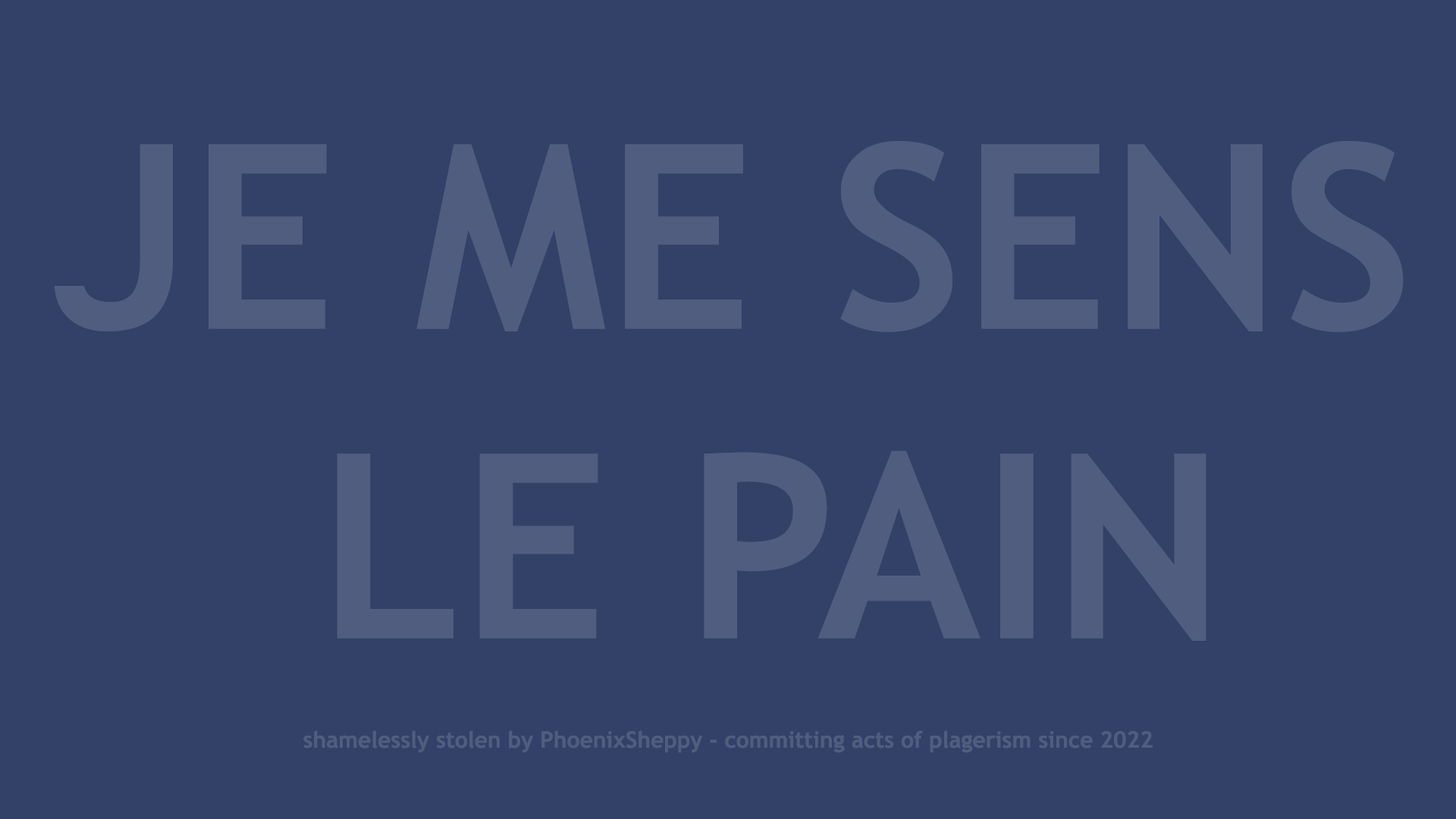
<style>
.page{position:relative;width:1456px;height:819px;background:#334169}
.page>*{position:absolute;margin:0}
.t1{font:257.8px "TrebuchetMS-Bold";color:#515d7f}
.t2{font:22.7px "TrebuchetMS-Bold";color:#515d7f}
</style>
<div class="page">
<p class="t1" style="left:55px;top:141px;width:1349px;height:500px;text-align:center">JE ME SENS <br>LE PAIN</p>
<p class="t2" style="left:303px;top:730px;width:850px;height:23px">shamelessly stolen by PhoenixSheppy - committing acts of plagerism since 2022</p>
</div>
